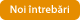
<style>
.page{position:relative;width:80px;height:20px;background:#e68d00}
.page>*{position:absolute;margin:0}
.t1{font:11px "MyriadPro-Semibold";color:#ffffff}
</style>
<div class="page">
<p class="t1" style="left:10px;top:5px;width:59px;height:8px">Noi întrebări</p>
</div>
